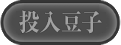
<style>
.page{position:relative;width:121px;height:45px}
.page>*{position:absolute;margin:0}
.t1{font:24px "RyuminPr6N-ExBold";color:#a1a1a1;scale:0.9 1}
</style>
<div class="page">
<p class="t1" style="left:19px;top:10px;width:83px;height:24px">投入豆子</p>
</div>
